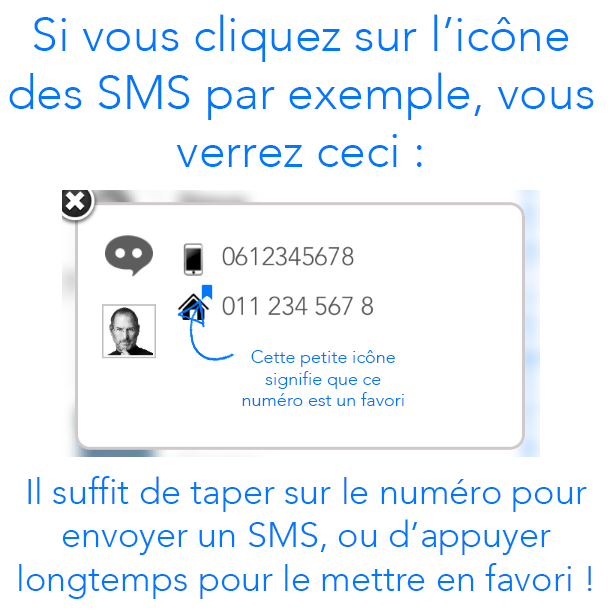
<style>
.page{position:relative;width:612px;height:612px;background:#ffffff}
.page>*{position:absolute;margin:0}
.t1{font:48px "Avenir-Light";color:#0077ff}
.t2{font:18px "Avenir-Light";color:#0077ff}
.t3{font:36px "Avenir-Light";color:#0077ff}
</style>
<div class="page">
<p class="t1" style="left:9px;top:14px;width:585px;height:153px;text-align:center">Si vous cliquez sur l’icône des SMS par exemple, vous verrez ceci :</p>
<p class="t2" style="left:242px;top:350px;width:162px;height:56px;text-align:center">Cette petite icône<br>signifie que ce<br>numéro est un favori</p>
<p class="t3" style="left:19px;top:476px;width:573px;height:123px;text-align:center">Il suffit de taper sur le numéro pour envoyer un SMS, ou d’appuyer<br>longtemps pour le mettre en favori !</p>
</div>
